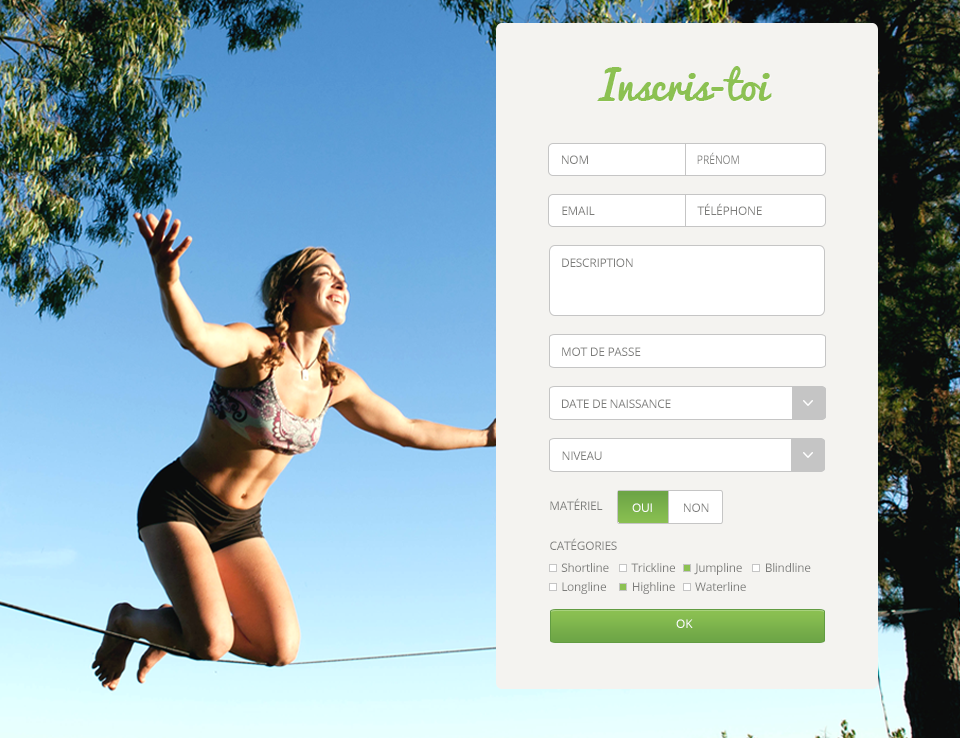
<style>
.page{position:relative;width:960px;height:738px;background:#f4f3f0}
.page>*{position:absolute;margin:0}
.t1{font:40px "Pacifico";color:#8cc152}
.t2{font:12px "OpenSans";letter-spacing:-0.025em;color:#7d7d7b;text-transform:uppercase}
.t3{font:12px "OpenSans";color:#7d7d7b;text-transform:uppercase;scale:0.85 1}
.t4{font:12px "OpenSans";letter-spacing:-0.025em;color:#ffffff;text-transform:uppercase}
.t5{font:12px "OpenSans";letter-spacing:-0.025em;color:#ffffff}
.t6{font:12px "OpenSans";letter-spacing:-0.025em;color:#7d7d7b}
.t7{font:12px "OpenSans";color:#ffffff;text-transform:uppercase}
</style>
<div class="page">
<p class="t1" style="left:597px;top:66px;width:175px;height:35px">Inscris-toi</p>
<p class="t2" style="left:562px;top:155px;width:26px;height:9px">Nom</p>
<p class="t3" style="left:697px;top:152px;width:42px;height:12px">prénom</p>
<p class="t2" style="left:562px;top:206px;width:33px;height:9px">email</p>
<p class="t2" style="left:697px;top:203px;width:65px;height:12px">Téléphone</p>
<p class="t2" style="left:562px;top:258px;width:71px;height:9px">Description</p>
<p class="t2" style="left:562px;top:347px;width:79px;height:9px">mot de passe</p>
<p class="t2" style="left:562px;top:399px;width:109px;height:9px">Date de naissance</p>
<p class="t2" style="left:562px;top:451px;width:40px;height:9px">Niveau</p>
<p class="t2" style="left:550px;top:498px;width:53px;height:12px">matériel</p>
<p class="t4" style="left:632px;top:503px;width:20px;height:9px"><span class="t5">O</span>ui</p>
<p class="t4" style="left:632px;top:503px;width:20px;height:9px"><span class="t5">O</span>ui</p>
<p class="t2" style="left:684px;top:503px;width:25px;height:9px">Non</p>
<p class="t2" style="left:550px;top:538px;width:67px;height:12px">Catégories</p>
<p class="t6" style="left:561px;top:563px;width:250px;height:12px">Shortline        Trickline       Jumpline        Blindline</p>
<p class="t6" style="left:562px;top:582px;width:184px;height:12px">Longline         Highline       Waterline</p>
<p class="t7" style="left:676px;top:619px;width:17px;height:9px">OK</p>
</div>
